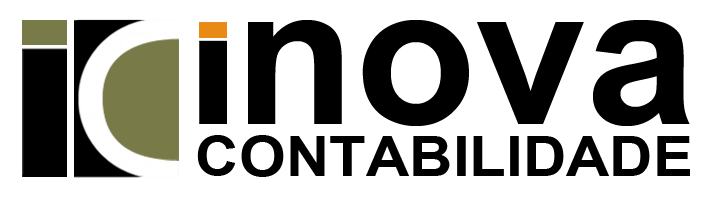
<style>
.page{position:relative;width:709px;height:197px;background:#ffffff}
.page>*{position:absolute;margin:0}
.t1{font:196.8px "Arial-BoldMT";color:#000000}
.t2{font:55.1px "Arial-BoldMT";color:#000000;scale:1.09 1}
</style>
<div class="page">
<p class="t1" style="left:248px;top:20px;width:442px;height:106px">nova</p>
<p class="t2" style="left:197px;top:135px;width:493px;height:42px">CONTABILIDADE</p>
</div>
